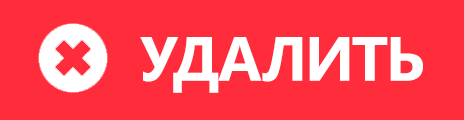
<style>
.page{position:relative;width:464px;height:120px;background:#ff2c3b}
.page>*{position:absolute;margin:0}
.t1{font:62.5px "SegoeUI-Bold";letter-spacing:-0.04em;color:#ffffff;text-transform:uppercase}
</style>
<div class="page">
<p class="t1" style="left:140px;top:37px;width:283px;height:56px">удалить</p>
</div>
